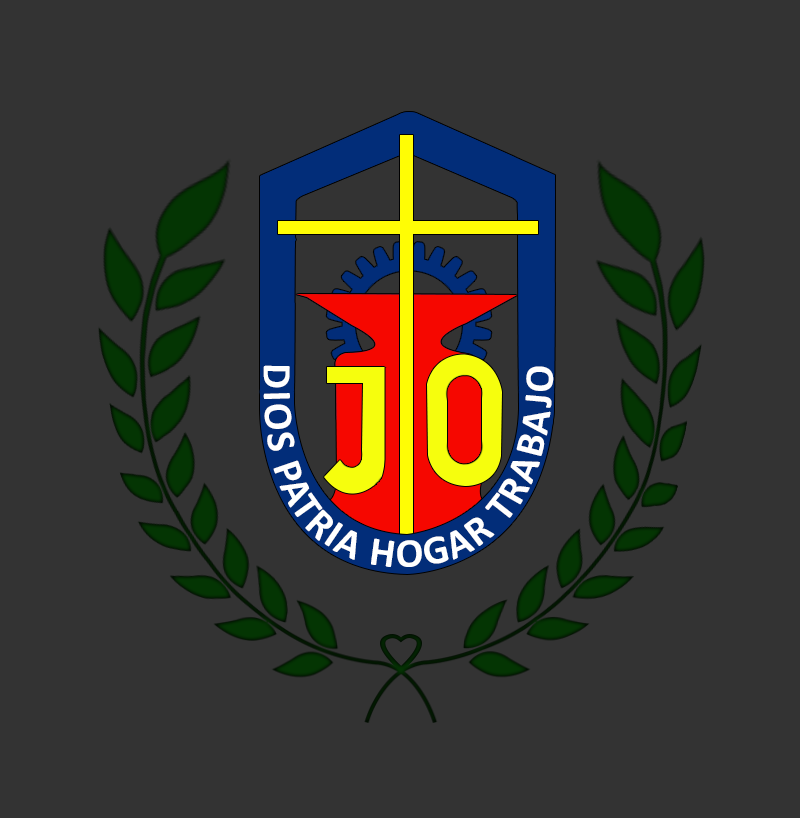
<style>
.page{position:relative;width:800px;height:818px;background:#333333}
.page>*{position:absolute;margin:0}
.t1{font:41px "Calibri-Bold";letter-spacing:0.05em;color:#ffffff;text-transform:uppercase}
.t2{font:41px "Calibri-Bold";letter-spacing:0.01em;color:#fffd05;text-transform:uppercase}
</style>
<div class="page">
<p class="t1" style="left:263px;top:365px;width:291px;height:202px;text-align:justify"><span class="t2">    </span>dios Patria hogar trabajo</p>
</div>
